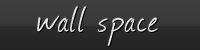
<style>
.page{position:relative;width:200px;height:50px}
.page>*{position:absolute;margin:0}
.t1{font:42px "Journal";letter-spacing:0.05em;color:#e3e3e3}
</style>
<div class="page">
<p class="t1" style="left:37px;top:6px;width:121px;height:40px">wall space</p>
</div>
